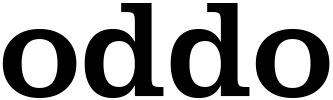
<style>
.page{position:relative;width:333px;height:100px;background:#ffffff}
.page>*{position:absolute;margin:0}
.t1{font:137.9px "ClarendonBT-Roman";color:#000000}
</style>
<div class="page">
<p class="t1" style="left:2px;top:3px;width:328px;height:95px">oddo</p>
</div>
